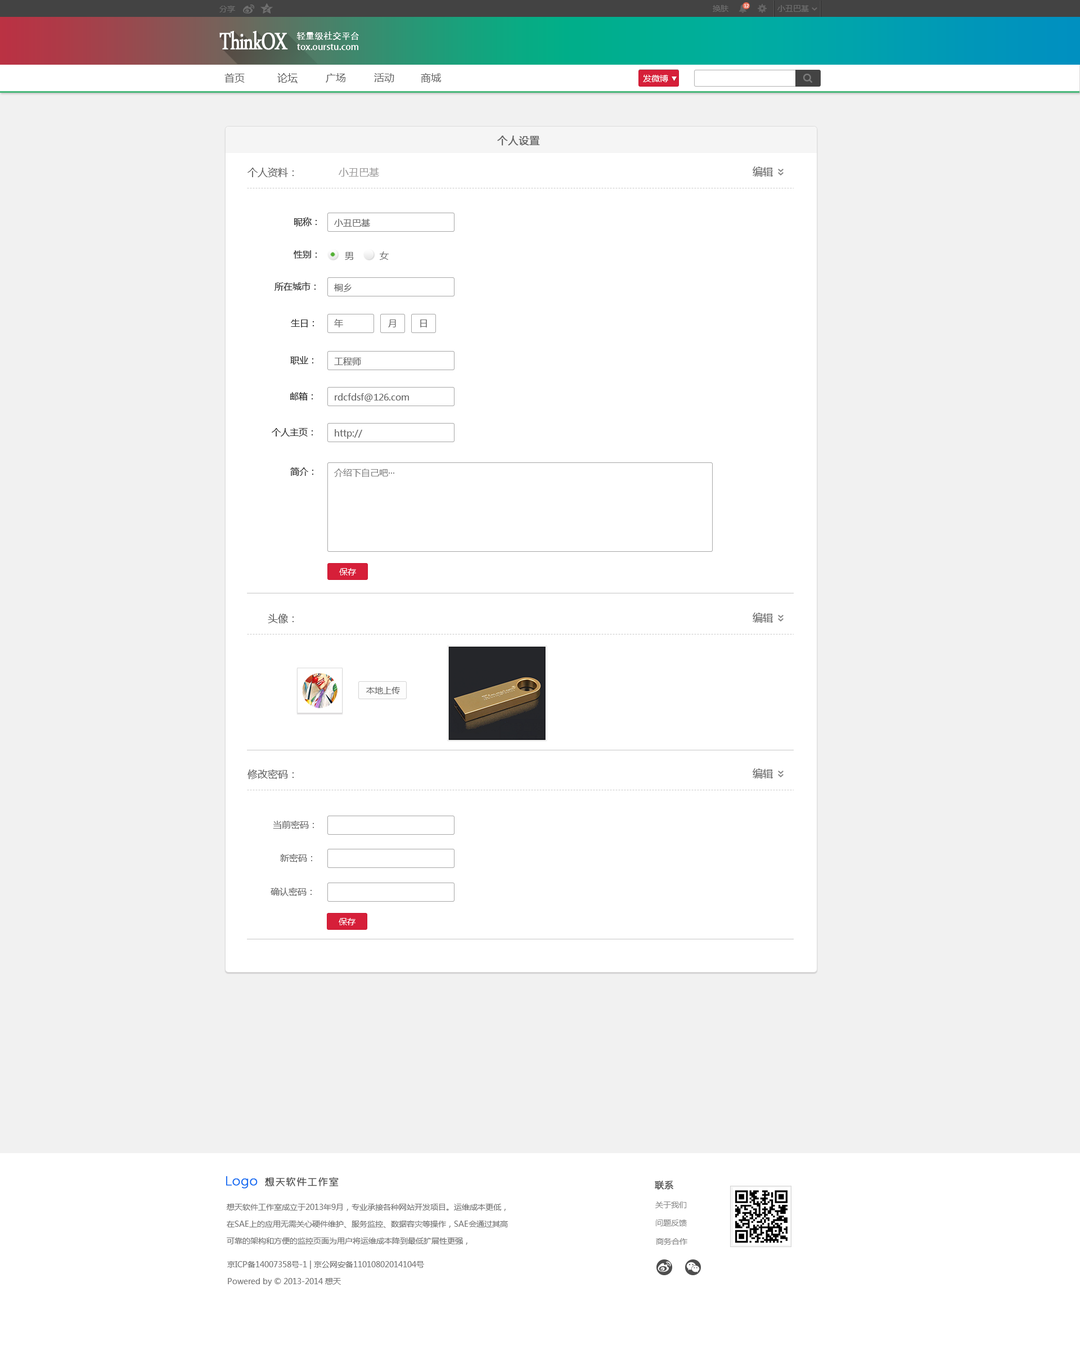
<style>
.page{position:relative;width:1080px;height:1350px;background:#ffffff}
.page>*{position:absolute;margin:0}
.t1{font:7.9px "MicrosoftYaHei";color:#6f6f6f}
.t2{font:4px "MicrosoftYaHei";scale:1.03 1}
.t3{font:34.2px "DaunPenh";letter-spacing:-0.05em;color:#ffffff;font-weight:bold;scale:0.76 1}
.t4{font:9px "AdobeHeitiStd-Regular";color:#ffffff}
.t5{font:10.1px "MicrosoftYaHei";color:#606060}
.t6{font:10.1px "MicrosoftYaHei";color:#575757}
.t7{font:10.1px "MicrosoftYaHei";color:#656565}
.t8{font:8.4px "MicrosoftYaHei";color:#ffffff}
.t9{font:10.1px "MicrosoftYaHei";color:#676767;font-weight:bold}
.t10{font:10.1px "MicrosoftYaHei";color:#676767}
.t11{font:10.1px "MicrosoftYaHei";color:#9d9b9b}
.t12{font:10.1px "MicrosoftYaHei";color:#696969}
.t13{font:9px "MicrosoftYaHei";color:#333333}
.t14{font:9px "MicrosoftYaHei";color:#6d6d6d}
.t15{font:9px "MicrosoftYaHei";color:#848484}
.t16{font:8.4px "MicrosoftYaHei";color:#6f6f6f}
.t17{font:9px "MicrosoftYaHei";color:#6e6e6e}
.t18{font:13.5px "ZHSRXT--GBK1-0";color:#196af1;font-weight:bold}
.t19{font:10.1px "ZHSRXT--GBK1-0";color:#434343;font-weight:bold}
.t20{font:9px "MicrosoftYaHei";color:#5c5c5c;font-weight:bold}
.t21{font:7.9px/16.9px "MicrosoftYaHei";color:#797979}
.t22{font:7.9px "MicrosoftYaHei";color:#8c8c8c}
</style>
<div class="page">
<p class="t1" style="left:219px;top:6px;width:16px;height:6px">分享</p>
<p class="t1" style="left:713px;top:5px;width:15px;height:7px">换肤</p>
<p class="t2" style="left:744px;top:4px;width:5px;height:4px">12</p>
<p class="t1" style="left:777px;top:5px;width:32px;height:7px">小丑巴基</p>
<p class="t3" style="left:219px;top:31px;width:69px;height:19px">ThinkOX</p>
<p class="t4" style="left:296px;top:32px;width:63px;height:8px">轻量级社交平台</p>
<p class="t4" style="left:297px;top:44px;width:61px;height:6px">tox.ourstu.com</p>
<p class="t5" style="left:224px;top:73px;width:21px;height:10px">首页</p>
<p class="t6" style="left:277px;top:73px;width:21px;height:10px">论坛</p>
<p class="t7" style="left:326px;top:73px;width:19px;height:10px">广场</p>
<p class="t7" style="left:374px;top:73px;width:20px;height:10px">活动</p>
<p class="t7" style="left:421px;top:73px;width:20px;height:10px">商城</p>
<p class="t8" style="left:643px;top:75px;width:25px;height:7px">发微博</p>
<p class="t9" style="left:497px;top:136px;width:43px;height:10px">个人设置</p>
<p class="t10" style="left:248px;top:168px;width:46px;height:9px">个人资料：</p>
<p class="t11" style="left:339px;top:168px;width:40px;height:9px">小丑巴基</p>
<p class="t12" style="left:753px;top:166px;width:20px;height:11px">编辑</p>
<p class="t13" style="left:294px;top:217px;width:23px;height:10px">昵称：</p>
<p class="t14" style="left:334px;top:219px;width:36px;height:8px">小丑巴基</p>
<p class="t13" style="left:294px;top:250px;width:23px;height:9px">性别：</p>
<p class="t14" style="left:345px;top:252px;width:8px;height:8px">男</p>
<p class="t14" style="left:380px;top:251px;width:9px;height:9px">女</p>
<p class="t13" style="left:274px;top:282px;width:42px;height:9px">所在城市：</p>
<p class="t14" style="left:334px;top:284px;width:18px;height:8px">桐乡</p>
<p class="t13" style="left:291px;top:319px;width:23px;height:8px">生日：</p>
<p class="t14" style="left:334px;top:319px;width:9px;height:8px">年</p>
<p class="t14" style="left:388px;top:320px;width:8px;height:7px">月</p>
<p class="t14" style="left:420px;top:320px;width:7px;height:7px">日</p>
<p class="t13" style="left:290px;top:356px;width:23px;height:8px">职业：</p>
<p class="t14" style="left:334px;top:357px;width:27px;height:9px">工程师</p>
<p class="t13" style="left:290px;top:392px;width:23px;height:8px">邮箱：</p>
<p class="t14" style="left:335px;top:393px;width:74px;height:9px">rdcfdsf@126.com</p>
<p class="t13" style="left:272px;top:428px;width:41px;height:8px">个人主页：</p>
<p class="t14" style="left:335px;top:429px;width:27px;height:10px">http://</p>
<p class="t13" style="left:290px;top:467px;width:23px;height:9px">简介：</p>
<p class="t15" style="left:334px;top:469px;width:60px;height:8px">介绍下自己吧···</p>
<p class="t8" style="left:339px;top:568px;width:17px;height:7px">保存</p>
<p class="t10" style="left:268px;top:614px;width:26px;height:9px">头像：</p>
<p class="t12" style="left:753px;top:613px;width:20px;height:10px">编辑</p>
<p class="t16" style="left:366px;top:687px;width:34px;height:7px">本地上传</p>
<p class="t10" style="left:248px;top:770px;width:46px;height:9px">修改密码：</p>
<p class="t12" style="left:753px;top:768px;width:20px;height:10px">编辑</p>
<p class="t17" style="left:273px;top:821px;width:41px;height:8px">当前密码：</p>
<p class="t17" style="left:280px;top:854px;width:32px;height:8px">新密码：</p>
<p class="t17" style="left:271px;top:888px;width:41px;height:8px">确认密码：</p>
<p class="t8" style="left:339px;top:918px;width:17px;height:7px">保存</p>
<p class="t18" style="left:226px;top:1176px;width:32px;height:13px">Logo</p>
<p class="t19" style="left:265px;top:1177px;width:74px;height:9px">想天软件工作室</p>
<p class="t20" style="left:655px;top:1181px;width:18px;height:9px">联系</p>
<p class="t21" style="left:227px;top:1204px;width:281px;height:41px">想天软件工作室成立于2013年9月，专业承接各种网站开发项目。运维成本更低，<br>在SAE上的应用无需关心硬件维护、服务监控、数据容灾等操作，SAE会通过其高<br>可靠的架构和方便的监控页面为用户将运维成本降到最低扩展性更强，</p>
<p class="t22" style="left:655px;top:1202px;width:31px;height:6px">关于我们</p>
<p class="t22" style="left:656px;top:1220px;width:31px;height:6px">问题反馈</p>
<p class="t22" style="left:656px;top:1238px;width:31px;height:7px">商务合作</p>
<p class="t21" style="left:227px;top:1261px;width:197px;height:25px">京ICP备14007358号-1 | 京公网安备11010802014104号<br>Powered by © 2013-2014 想天</p>
</div>
